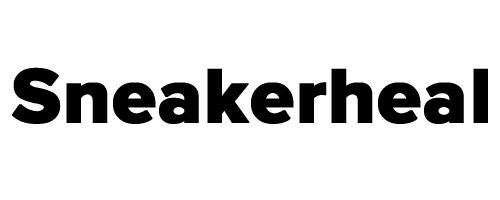
<style>
.page{position:relative;width:500px;height:200px;background:#ffffff}
.page>*{position:absolute;margin:0}
.t1{font:80px "ProximaNova-Extrabld";color:#000000;font-weight:bold}
</style>
<div class="page">
<p class="t1" style="left:12px;top:67px;width:476px;height:57px">Sneakerheal</p>
</div>
